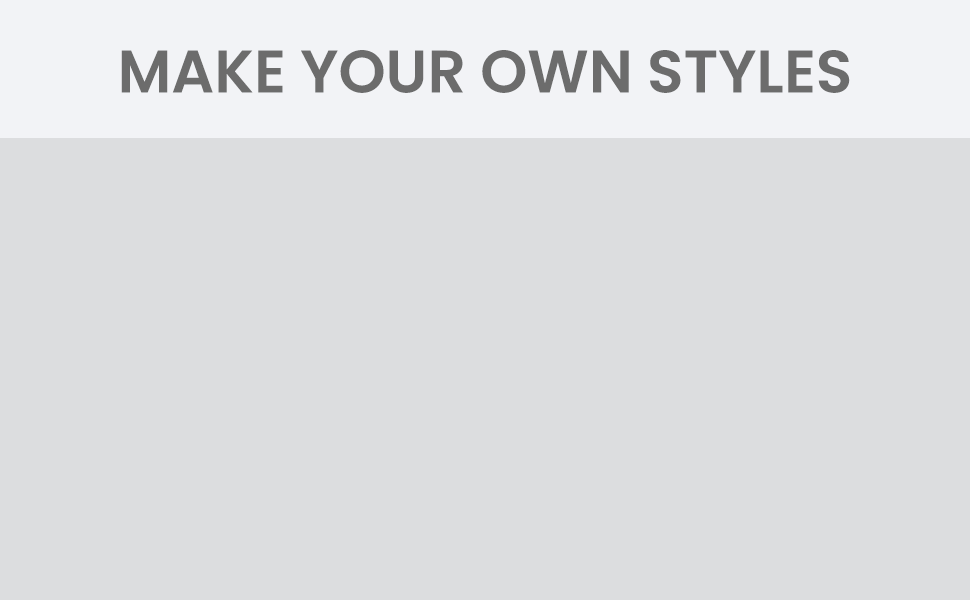
<style>
.page{position:relative;width:970px;height:600px;background:#dcdddf}
.page>*{position:absolute;margin:0}
.t1{font:60px "Poppins-SemiBold";color:#6c6c6c;text-transform:uppercase}
</style>
<div class="page">
<p class="t1" style="left:121px;top:50px;width:729px;height:43px">Make Your Own Styles</p>
</div>
